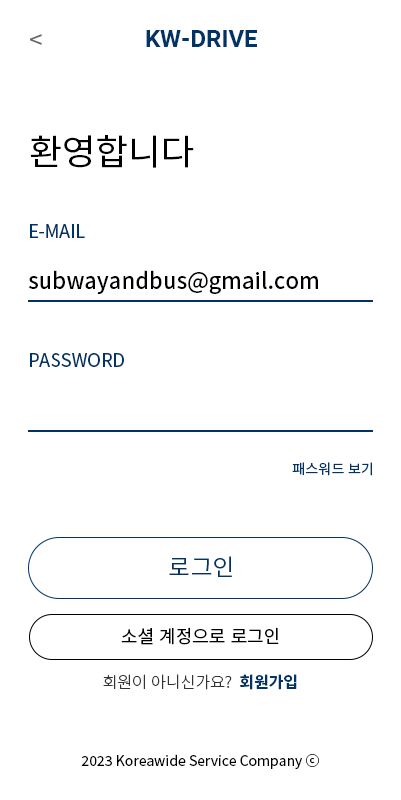
<style>
.page{position:relative;width:401px;height:800px;background:#ffffff}
.page>*{position:absolute;margin:0}
.t1{font:24px "Roboto-Bold";color:#003366}
.t2{font:24px "NotoSansKR-Regular";color:#666666}
.t3{font:36px "NotoSansKR-Regular";color:#000000}
.t4{font:18px "NotoSansKR-Regular";color:#003366}
.t5{font:22px "NotoSansKR-Medium";color:#000000}
.t6{font:14px "NotoSansKR-Regular";color:#003366}
.t7{font:24px "NotoSansKR-Regular";color:#003366}
.t8{font:18px "NotoSansKR-Regular";color:#000000}
.t9{font:16px "NotoSansKR-Light";color:#333333}
.t10{font:16px "NotoSansKR-Bold";color:#003366}
.t11{font:14px "NotoSansKR-Regular";color:#000000}
</style>
<div class="page">
<p class="t1" style="left:146px;top:30px;width:111px;height:17px">KW-DRIVE</p>
<p class="t2" style="left:30px;top:34px;width:12px;height:11px">&lt;</p>
<p class="t3" style="left:30px;top:135px;width:164px;height:33px">환영합니다</p>
<p class="t4" style="left:30px;top:224px;width:55px;height:14px">E-MAIL</p>
<p class="t5" style="left:28px;top:270px;width:290px;height:24px">subwayandbus@gmail.com</p>
<p class="t4" style="left:30px;top:353px;width:94px;height:14px">PASSWORD</p>
<p class="t6" style="left:292px;top:462px;width:80px;height:14px">패스워드 보기</p>
<p class="t7" style="left:169px;top:556px;width:63px;height:21px">로그인</p>
<p class="t8" style="left:121px;top:627px;width:158px;height:18px">소셜 계정으로 로그인</p>
<p class="t9" style="left:103px;top:674px;width:194px;height:16px">회원이 아니신가요?  <span class="t10">회원가입</span></p>
<p class="t11" style="left:81px;top:754px;width:238px;height:15px">2023 Koreawide Service Company ⓒ</p>
</div>
